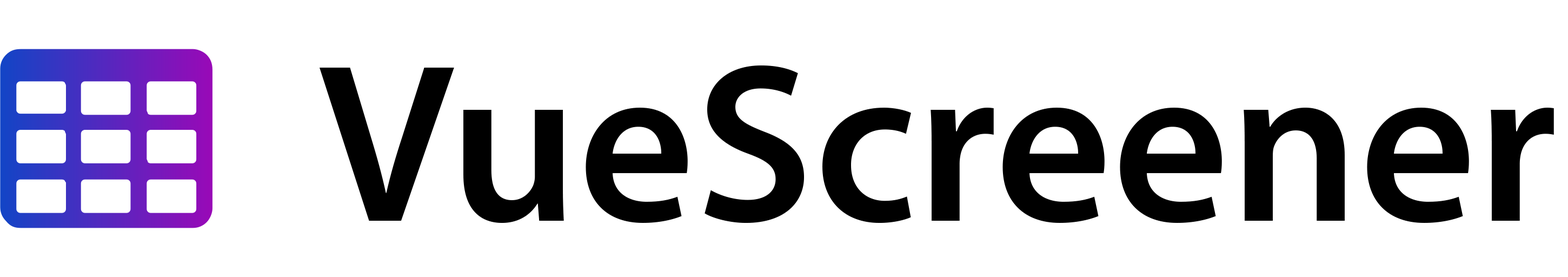
<style>
.page{position:relative;width:1568px;height:277px;background:#ffffff}
.page>*{position:absolute;margin:0}
.t1{font:227.1px "MyriadPro-Semibold";color:#000000}
</style>
<div class="page">
<p class="t1" style="left:320px;top:65px;width:1234px;height:158px">VueScreener</p>
</div>
